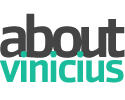
<style>
.page{position:relative;width:125px;height:100px;background:#ffffff}
.page>*{position:absolute;margin:0}
.t1{font:44.2px/25px "ZemestroStd-Medium";letter-spacing:-0.05em;color:#1abc9c}
.t2{font:61.7px/25px "ZemestroStd-Medium";letter-spacing:-0.1em;color:#444444}
</style>
<div class="page">
<p class="t1" style="left:0px;top:13px;width:125px;height:70px;text-align:center"><span class="t2">about<br></span>vinicius</p>
</div>
